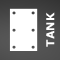
<style>
.page{position:relative;width:60px;height:60px;background:#ffffff}
.page>*{position:absolute;margin:0}
.t1{font:11px "Verdana-Bold";color:#ffffff}
</style>
<div class="page">
<p class="t1" style="left:46px;top:12px;width:9px;height:35px;rotate:-90deg">TANK</p>
</div>
